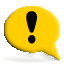
<style>
.page{position:relative;width:64px;height:64px;background:#ffffff}
.page>*{position:absolute;margin:0}
.t1{font:41.3px "GoudyStout";color:#080808;scale:0.87 1}
</style>
<div class="page">
<p class="t1" style="left:26px;top:11px;width:11px;height:33px">!</p>
</div>
